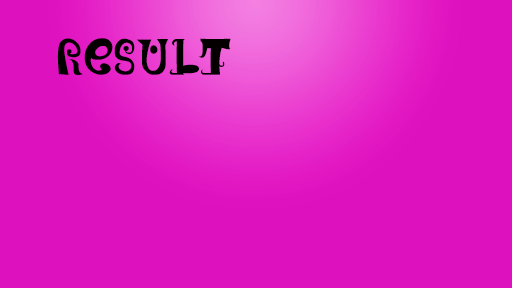
<style>
.page{position:relative;width:512px;height:288px;background:#de11bf}
.page>*{position:absolute;margin:0}
.t1{font:50px "MadokaLetters";color:#040000}
</style>
<div class="page">
<p class="t1" style="left:57px;top:38px;width:174px;height:37px">result</p>
</div>
